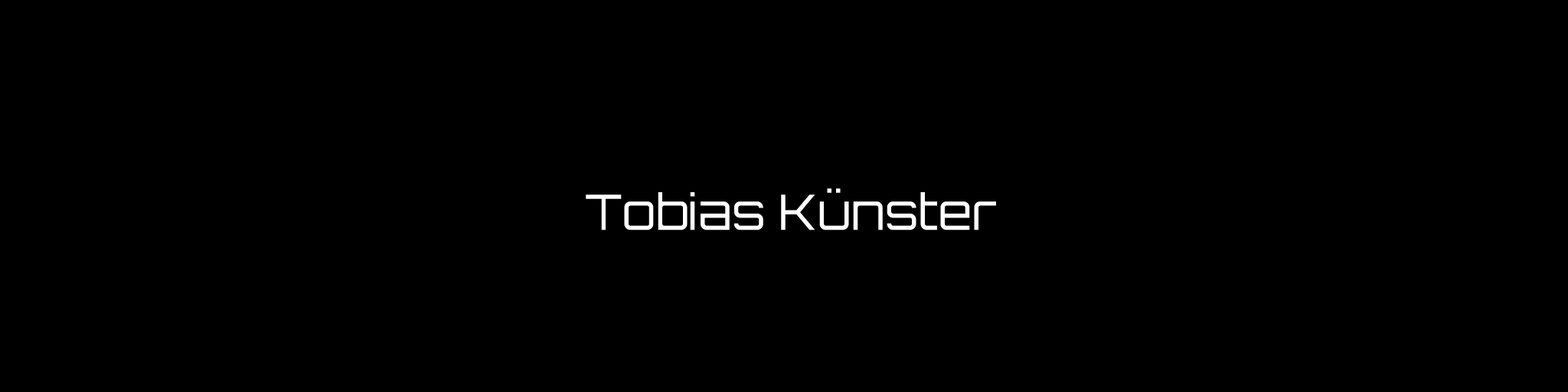
<style>
.page{position:relative;width:1568px;height:392px;background:#000000}
.page>*{position:absolute;margin:0}
.t1{font:48.6px "Orbitron-Light";color:#ffffff}
</style>
<div class="page">
<p class="t1" style="left:586px;top:188px;width:410px;height:42px">Tobias Künster</p>
</div>
